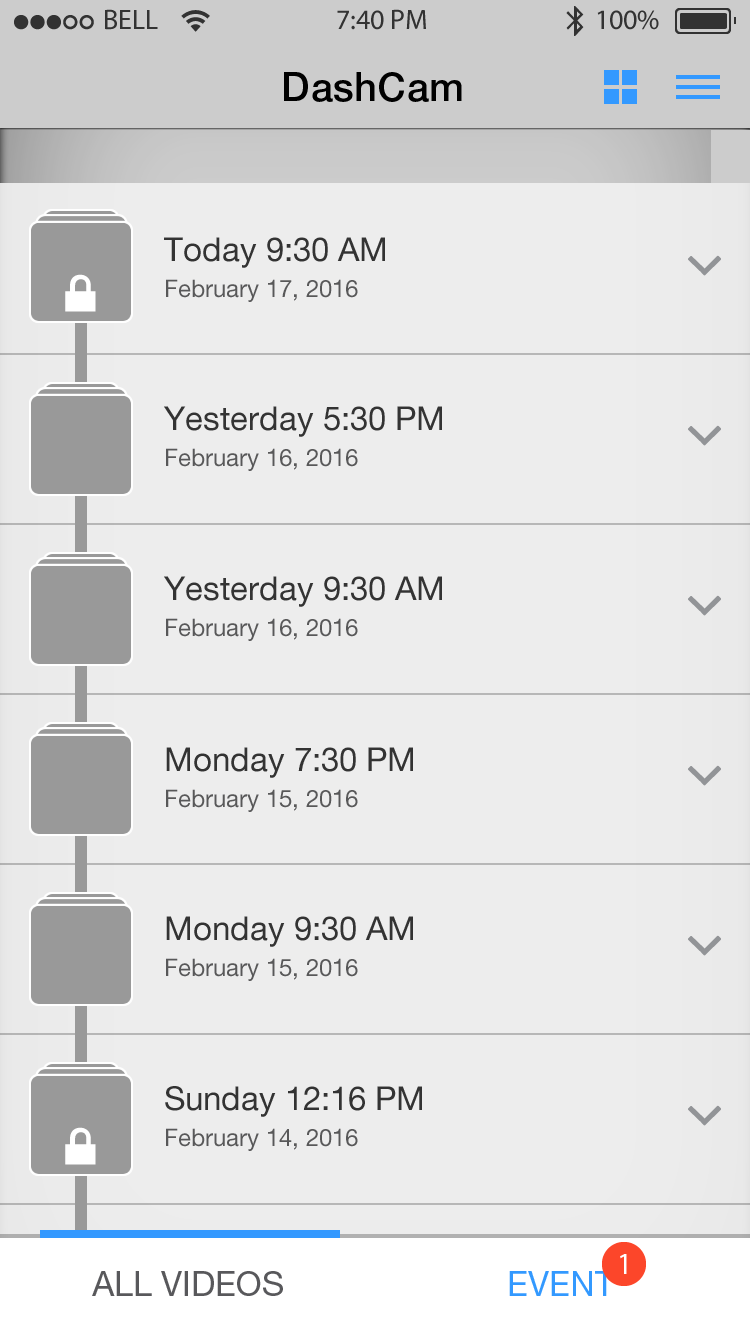
<style>
.page{position:relative;width:750px;height:1334px;background:#ededed}
.page>*{position:absolute;margin:0}
.t1{font:40.2px "HelveticaNeueLTStd-Md";color:#000000}
.t2{font:24px/36px "HelveticaNeueLTStd-Roman";color:#585859}
.t3{font:33px/39.6px "HelveticaNeueLTStd-Roman";color:#333333}
.t4{font:30px "MyriadPro-Regular";letter-spacing:-0.01em;color:#ffffff}
.t5{font:34px "HelveticaNeueLTStd-Roman";color:#58585b}
.t6{font:34px "HelveticaNeueLTStd-Roman";color:#3399ff}
</style>
<div class="page">
<p class="t1" style="left:284px;top:72px;width:178px;height:30px">DashCam</p>
<p class="t2" style="left:164px;top:237px;width:221px;height:65px"><span class="t3">Today 9:30 AM<br></span>February 17, 2016</p>
<p class="t3" style="left:164px;top:406px;width:278px;height:65px">Yesterday 5:30 PM<br><span class="t2">February 16, 2016</span></p>
<p class="t3" style="left:164px;top:576px;width:278px;height:65px">Yesterday 9:30 AM<br><span class="t2">February 16, 2016</span></p>
<p class="t2" style="left:166px;top:747px;width:247px;height:65px"><span class="t3">Monday 7:30 PM<br></span>February 15, 2016</p>
<p class="t2" style="left:166px;top:916px;width:247px;height:65px"><span class="t3">Monday 9:30 AM<br></span>February 15, 2016</p>
<p class="t2" style="left:165px;top:1086px;width:257px;height:65px"><span class="t3">Sunday 12:16 PM<br></span>February 14, 2016</p>
<p class="t4" style="left:620px;top:1254px;width:7px;height:20px">1</p>
<p class="t5" style="left:92px;top:1271px;width:191px;height:25px">ALL VIDEOS</p>
<p class="t6" style="left:509px;top:1271px;width:106px;height:25px">EVENT</p>
</div>
